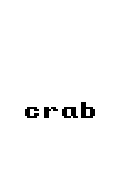
<style>
.page{position:relative;width:120px;height:195px;background:#ffffff}
.page>*{position:absolute;margin:0}
.t1{font:18px "KongtextRegular";letter-spacing:0.022em;color:#000000}
</style>
<div class="page">
<p class="t1" style="left:25px;top:102px;width:70px;height:16px">crab</p>
</div>
